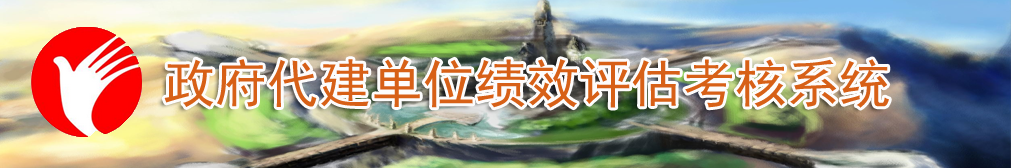
<style>
.page{position:relative;width:1011px;height:168px}
.page>*{position:absolute;margin:0}
.t1{font:52px "SimHei";color:#d76017}
</style>
<div class="page">
<p class="t1" style="left:164px;top:59px;width:725px;height:49px">政府代建单位绩效评估考核系统</p>
</div>
